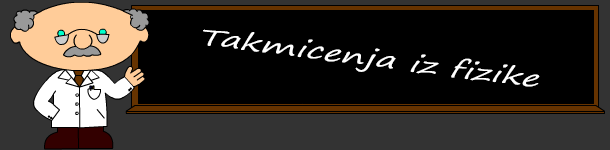
<style>
.page{position:relative;width:610px;height:150px;background:#000000}
.page>*{position:absolute;margin:0}
.t1{font:22.9px "SegoePrint";color:#ffffff;font-style:italic;scale:1.52 1}
</style>
<div class="page">
<p class="t1" style="left:203px;top:29px;width:337px;height:58px;rotate:7deg">Takmicenja iz fizike</p>
</div>
